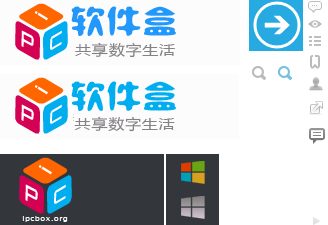
<style>
.page{position:relative;width:328px;height:225px;background:#ffffff}
.page>*{position:absolute;margin:0}
.t1{font:32.4px "SXSLST";letter-spacing:-0.01em;color:#2398fb;scale:1.11 1}
.t2{font:14.4px "MicrosoftYaHei";letter-spacing:0.05em;color:#858285;scale:1.11 1}
.t3{font:32.4px "SXSLST";letter-spacing:-0.01em;color:#00aeef;scale:1.11 1}
.t4{font:7.2px "LucidaSansUnicode";letter-spacing:0.05em;color:#fdfcfd;scale:1.11 1}
</style>
<div class="page">
<p class="t1" style="left:71px;top:6px;width:105px;height:30px">软件盒</p>
<p class="t2" style="left:75px;top:42px;width:100px;height:16px">共享数字生活</p>
<p class="t3" style="left:71px;top:81px;width:105px;height:30px">软件盒</p>
<p class="t2" style="left:74px;top:116px;width:101px;height:16px">共享数字生活</p>
<p class="t4" style="left:22px;top:216px;width:46px;height:6px">ipcbox.org</p>
</div>
